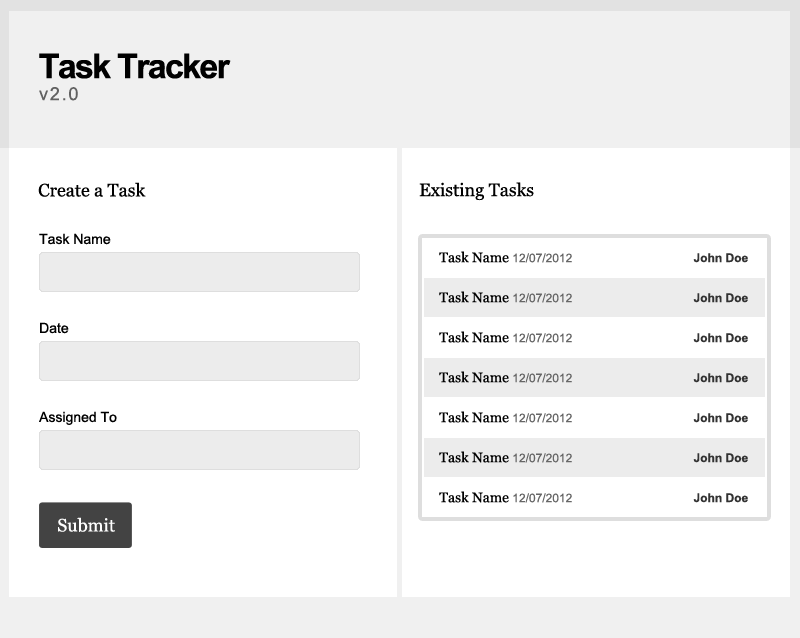
<style>
.page{position:relative;width:800px;height:638px;background:#ffffff}
.page>*{position:absolute;margin:0}
.t1{font:34px "Arial-BoldMT";letter-spacing:-0.05em;color:#000000}
.t2{font:18px "ArialMT";letter-spacing:0.1em;color:#676767}
.t3{font:18px "Georgia";color:#000000}
.t4{font:14px "ArialMT";color:#000000}
.t5{font:12px "ArialMT";color:#666666}
.t6{font:14px "Georgia";color:#000000}
.t7{font:12px "Arial-BoldMT";color:#333333}
.t8{font:18px "Georgia";color:#ffffff}
</style>
<div class="page">
<p class="t1" style="left:39px;top:53px;width:192px;height:26px">Task Tracker</p>
<p class="t2" style="left:39px;top:87px;width:39px;height:14px">v2.0</p>
<p class="t3" style="left:38px;top:182px;width:108px;height:15px">Create a Task</p>
<p class="t3" style="left:419px;top:182px;width:115px;height:19px">Existing Tasks</p>
<p class="t4" style="left:39px;top:233px;width:72px;height:12px">Task Name</p>
<p class="t5" style="left:439px;top:251px;width:133px;height:12px"><span class="t6">Task Name </span>12/07/2012</p>
<p class="t7" style="left:693px;top:253px;width:55px;height:10px">John Doe</p>
<p class="t5" style="left:439px;top:291px;width:133px;height:12px"><span class="t6">Task Name </span>12/07/2012</p>
<p class="t7" style="left:693px;top:293px;width:55px;height:10px">John Doe</p>
<p class="t4" style="left:40px;top:322px;width:29px;height:12px">Date</p>
<p class="t5" style="left:439px;top:331px;width:133px;height:12px"><span class="t6">Task Name </span>12/07/2012</p>
<p class="t7" style="left:693px;top:333px;width:55px;height:10px">John Doe</p>
<p class="t5" style="left:439px;top:371px;width:133px;height:12px"><span class="t6">Task Name </span>12/07/2012</p>
<p class="t7" style="left:693px;top:373px;width:55px;height:10px">John Doe</p>
<p class="t4" style="left:39px;top:411px;width:78px;height:14px">Assigned To</p>
<p class="t5" style="left:439px;top:411px;width:133px;height:12px"><span class="t6">Task Name </span>12/07/2012</p>
<p class="t7" style="left:693px;top:413px;width:55px;height:10px">John Doe</p>
<p class="t5" style="left:439px;top:451px;width:133px;height:12px"><span class="t6">Task Name </span>12/07/2012</p>
<p class="t7" style="left:693px;top:453px;width:55px;height:10px">John Doe</p>
<p class="t5" style="left:439px;top:491px;width:133px;height:12px"><span class="t6">Task Name </span>12/07/2012</p>
<p class="t7" style="left:693px;top:493px;width:55px;height:10px">John Doe</p>
<p class="t8" style="left:58px;top:517px;width:57px;height:15px">Submit</p>
</div>
